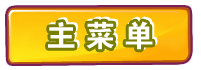
<style>
.page{position:relative;width:201px;height:70px;background:#ffffff}
.page>*{position:absolute;margin:0}
.t1{font:30px "Jdahei";letter-spacing:0.3em;color:#ffffff}
</style>
<div class="page">
<p class="t1" style="left:48px;top:21px;width:105px;height:29px">主菜单</p>
</div>
